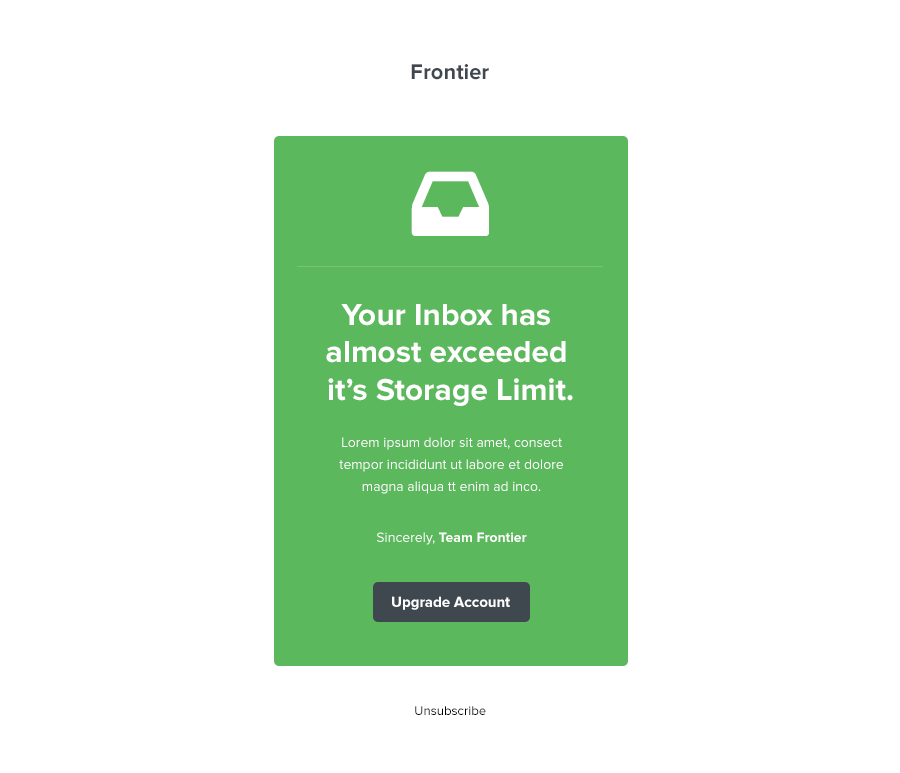
<style>
.page{position:relative;width:900px;height:773px;background:#ffffff}
.page>*{position:absolute;margin:0}
.t1{font:22px "ProximaNova-Bold";color:#40484f}
.t2{font:31.7px/32.1px "ProximaNova-Bold";color:#fffefe}
.t3{font:14px/22px "ProximaNova-Regular";color:#ffffff}
.t4{font:14px "ProximaNova-Bold";color:#ffffff}
.t5{font:14px "ProximaNova-Regular";color:#ffffff}
.t6{font:15px "ProximaNova-Bold";color:#ffffff}
.t7{font:13.1px "ProximaNova-Regular";color:#000000}
</style>
<div class="page">
<p class="t1" style="left:411px;top:64px;width:78px;height:16px">Frontier</p>
<p class="t2" style="left:326px;top:304px;width:247px;height:102px;text-align:center">Your Inbox has <br>almost exceeded <br>it’s Storage Limit.</p>
<p class="t3" style="left:339px;top:437px;width:224px;height:57px;text-align:center">Lorem ipsum dolor sit amet, consect tempor incididunt ut labore et dolore magna aliqua tt enim ad inco.</p>
<p class="t4" style="left:377px;top:532px;width:150px;height:13px"><span class="t5">Sincerely,</span> Team Frontier</p>
<p class="t6" style="left:392px;top:596px;width:118px;height:14px">Upgrade Account</p>
<p class="t7" style="left:415px;top:706px;width:71px;height:9px">Unsubscribe</p>
</div>
